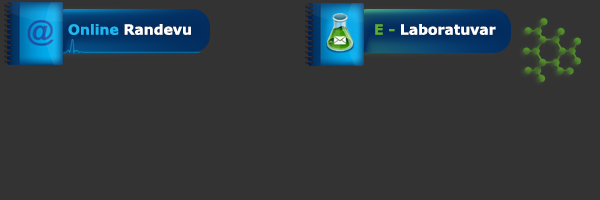
<style>
.page{position:relative;width:600px;height:200px;background:#333333}
.page>*{position:absolute;margin:0}
.t1{font:14px "Verdana-Bold";color:#ffffff}
.t2{font:14px "Verdana-Bold";color:#1eb7f0}
.t3{font:14px "Verdana-Bold";color:#5eac2a}
</style>
<div class="page">
<p class="t1" style="left:68px;top:24px;width:123px;height:11px"><span class="t2">Online</span> Randevu</p>
<p class="t1" style="left:375px;top:24px;width:121px;height:11px"><span class="t3">E - </span>Laboratuvar</p>
</div>
